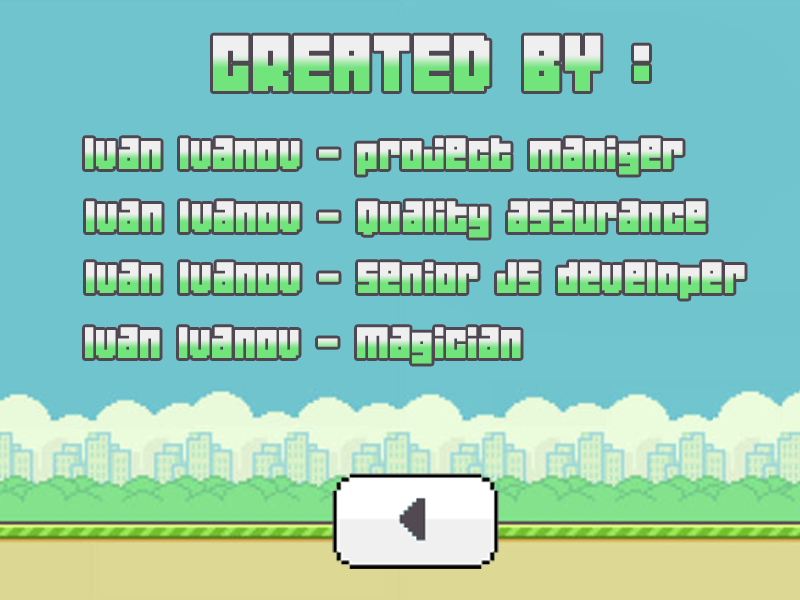
<style>
.page{position:relative;width:800px;height:600px;background:#70c4ce}
.page>*{position:absolute;margin:0}
.t1{font:70.5px "04b19"}
.t2{font:39.1px "04b19"}
</style>
<div class="page">
<p class="t1" style="left:213px;top:35px;width:388px;height:56px">CREATED BY</p>
<p class="t1" style="left:634px;top:45px;width:15px;height:36px">:</p>
<p class="t2" style="left:85px;top:138px;width:598px;height:37px">Ivan Ivanov - project maniger</p>
<p class="t2" style="left:86px;top:201px;width:620px;height:37px">Ivan Ivanov - Quality assurance</p>
<p class="t2" style="left:86px;top:262px;width:659px;height:37px">Ivan Ivanov - Senior JS developer</p>
<p class="t2" style="left:85px;top:327px;width:436px;height:37px">Ivan Ivanov - Magician</p>
</div>
